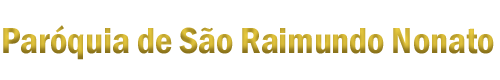
<style>
.page{position:relative;width:500px;height:80px;background:#ffffff}
.page>*{position:absolute;margin:0}
.t1{font:37.5px "FranklinGothic-DemiCond"}
</style>
<div class="page">
<p class="t1" style="left:3px;top:25px;width:491px;height:35px">Paróquia de São Raimundo Nonato</p>
</div>
